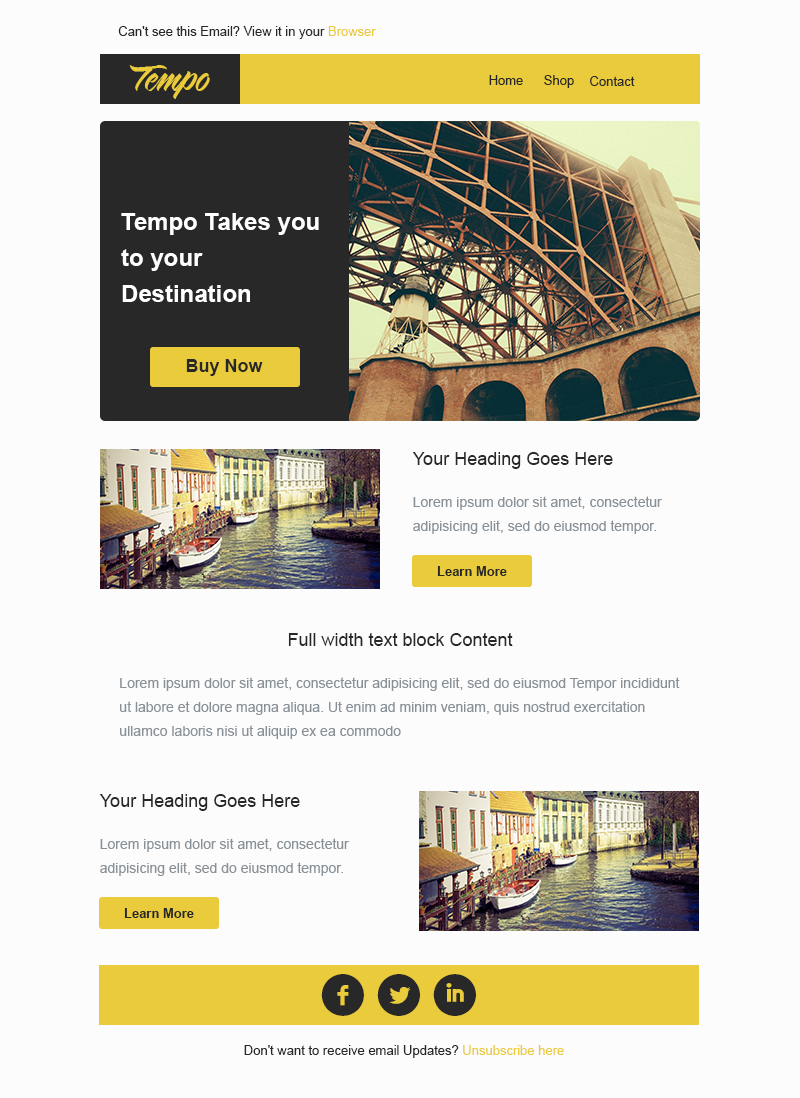
<style>
.page{position:relative;width:800px;height:1098px;background:#fcfcfc}
.page>*{position:absolute;margin:0}
.t1{font:13px "ArialMT";color:#282828}
.t2{font:13px "ArialMT";color:#eacb3c}
.t3{font:48px "LHFSarahScript";color:#eacb3c}
.t4{font:24px/36px "Arial-BoldMT";color:#ffffff}
.t5{font:18px "Arial-BoldMT";color:#282828}
.t6{font:18px "ArialMT";color:#282828}
.t7{font:14px/24px "ArialMT";color:#889098}
.t8{font:13px "Arial-BoldMT";color:#282828}
.t9{font:60px "Socialico";color:#282828}
</style>
<div class="page">
<p class="t1" style="left:118px;top:26px;width:258px;height:13px">Can't see this Email? View it in your <span class="t2">Browser</span></p>
<p class="t3" style="left:129px;top:65px;width:81px;height:34px">Tempo</p>
<p class="t1" style="left:489px;top:75px;width:34px;height:10px">Home</p>
<p class="t1" style="left:544px;top:75px;width:30px;height:13px">Shop</p>
<p class="t1" style="left:590px;top:76px;width:45px;height:10px">Contact</p>
<p class="t4" style="left:121px;top:213px;width:198px;height:89px">Tempo Takes you <br>to your <br>Destination</p>
<p class="t5" style="left:186px;top:359px;width:77px;height:17px">Buy Now</p>
<p class="t6" style="left:412px;top:452px;width:201px;height:17px">Your Heading Goes Here</p>
<p class="t7" style="left:413px;top:496px;width:249px;height:38px">Lorem ipsum dolor sit amet, consectetur adipisicing elit, sed do eiusmod tempor.</p>
<p class="t8" style="left:437px;top:566px;width:70px;height:10px">Learn More</p>
<p class="t6" style="left:288px;top:633px;width:225px;height:13px">Full width text block Content</p>
<p class="t7" style="left:120px;top:677px;width:560px;height:62px">Lorem ipsum dolor sit amet, consectetur adipisicing elit, sed do eiusmod Tempor incididunt ut labore et dolore magna aliqua. Ut enim ad minim veniam, quis nostrud exercitation ullamco laboris nisi ut aliquip ex ea commodo</p>
<p class="t6" style="left:99px;top:794px;width:201px;height:17px">Your Heading Goes Here</p>
<p class="t7" style="left:100px;top:838px;width:249px;height:38px">Lorem ipsum dolor sit amet, consectetur adipisicing elit, sed do eiusmod tempor.</p>
<p class="t8" style="left:124px;top:908px;width:70px;height:10px">Learn More</p>
<p class="t9" style="left:321px;top:974px;width:43px;height:42px">f</p>
<p class="t9" style="left:377px;top:974px;width:43px;height:42px">l</p>
<p class="t9" style="left:433px;top:974px;width:43px;height:42px">i</p>
<p class="t1" style="left:244px;top:1045px;width:320px;height:13px">Don't want to receive email Updates? <span class="t2">Unsubscribe here</span></p>
</div>
